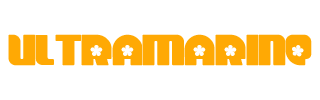
<style>
.page{position:relative;width:320px;height:100px;background:#ffffff}
.page>*{position:absolute;margin:0}
.t1{font:60px "Chick";color:#ffa904}
</style>
<div class="page">
<p class="t1" style="left:8px;top:34px;width:304px;height:32px">ULTRAMARINE</p>
</div>
